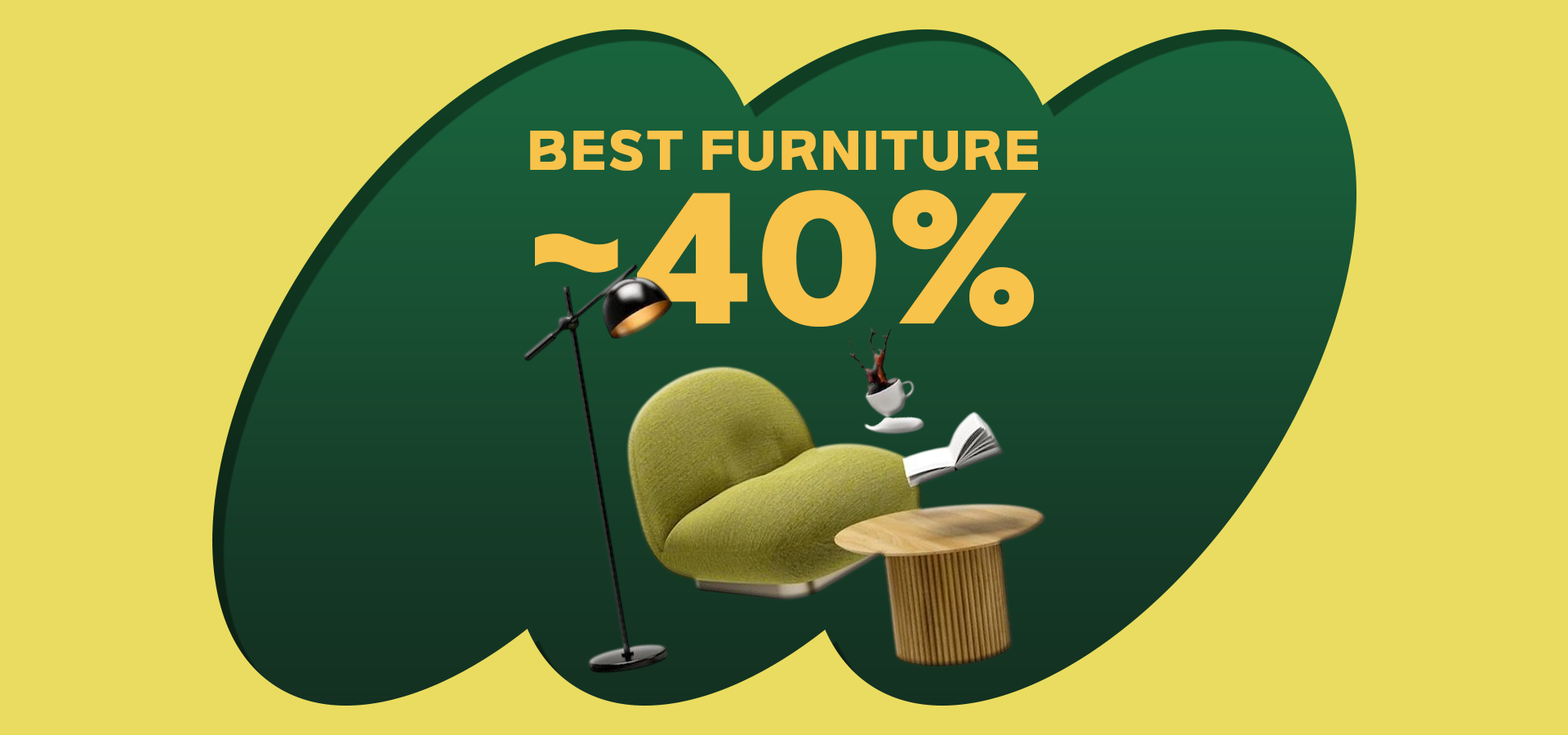
<style>
.page{position:relative;width:1568px;height:735px;background:#eadc60}
.page>*{position:absolute;margin:0}
.t1{font:49px "SBAggroB";letter-spacing:0.02em;color:#f7c34b;text-transform:uppercase}
.t2{font:163.3px "SBAggroB";letter-spacing:0.02em;color:#f7c34b;text-transform:uppercase}
</style>
<div class="page">
<p class="t1" style="left:530px;top:130px;width:508px;height:41px">BEST Furniture</p>
<p class="t2" style="left:535px;top:189px;width:499px;height:138px">~40%</p>
</div>
